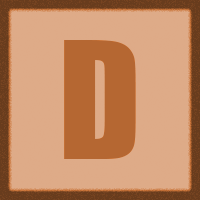
<style>
.page{position:relative;width:200px;height:200px;background:#deab88}
.page>*{position:absolute;margin:0}
.t1{font:150px "Impact";color:#b56732}
</style>
<div class="page">
<p class="t1" style="left:64px;top:40px;width:72px;height:119px">D</p>
</div>
